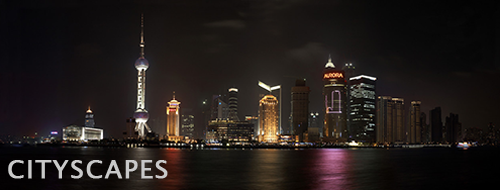
<style>
.page{position:relative;width:500px;height:190px}
.page>*{position:absolute;margin:0}
.t1{font:25.3px "LucidaSansUnicode";color:#c9c9c9;font-weight:bold}
</style>
<div class="page">
<p class="t1" style="left:8px;top:160px;width:160px;height:19px">CITYSCAPES</p>
</div>
